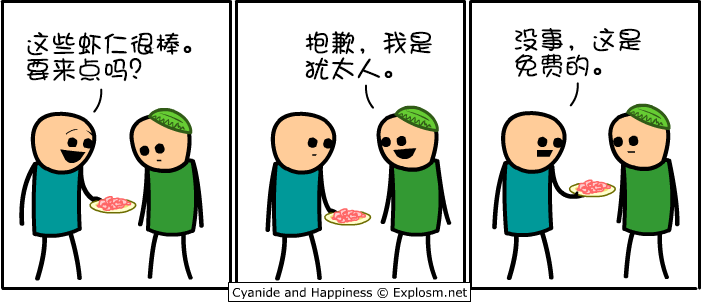
<style>
.page{position:relative;width:701px;height:303px;background:#ffffff}
.page>*{position:absolute;margin:0}
.t1{font:26px/26px "DFShaoNvW5";color:#000000}
</style>
<div class="page">
<p class="t1" style="left:514px;top:28px;width:127px;height:50px">没事，这是<br>免费的。</p>
<p class="t1" style="left:26px;top:32px;width:166px;height:50px">这些虾仁很棒。<br>要来点吗？</p>
<p class="t1" style="left:305px;top:31px;width:127px;height:49px">抱歉，我是<br>犹太人。</p>
</div>
